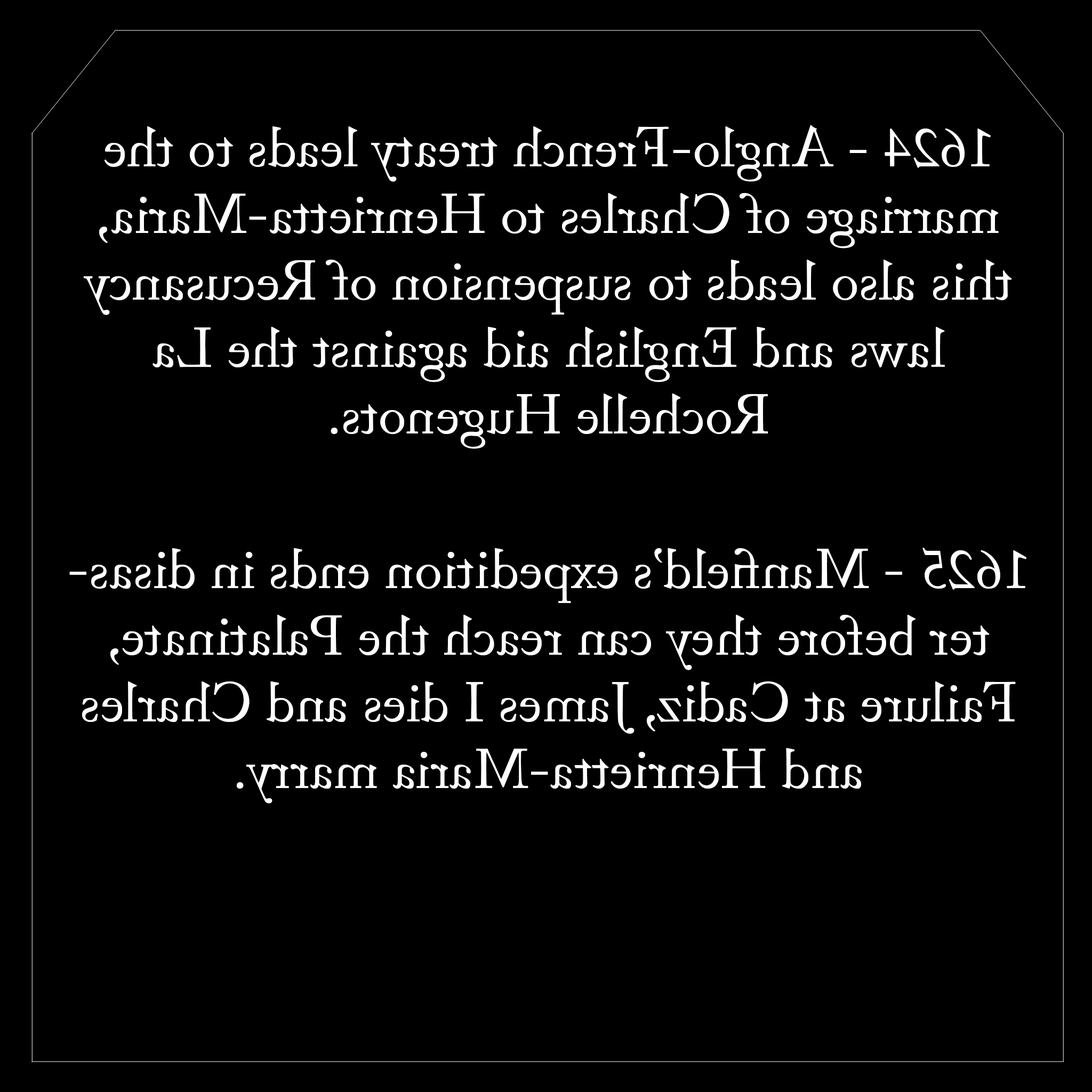
<style>
.page{position:relative;width:1092px;height:1092px;background:#000000}
.page>*{position:absolute;margin:0}
.t1{font:55.6px "ACaslonPro-Regular";color:#ffffff}
</style>
<div class="page">
<p class="t1" style="left:69px;top:125px;width:957px;height:679px;text-align:center;rotate:180deg">1624 - Anglo-French treaty leads to the marriage of Charles to Henrietta-Maria, this also leads to suspension of Recusancy laws and English aid against the La <br>Rochelle Hugenots.<br><br>1625 - Manfield’s expedition ends in disaster before they can reach the Palatinate, Failure at Cadiz, James I dies and Charles and Henrietta-Maria marry.</p>
</div>
